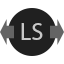
<style>
.page{position:relative;width:64px;height:64px;background:#ffffff}
.page>*{position:absolute;margin:0}
.t1{font:24px "MyriadPro-Regular";color:#c8c8c8}
</style>
<div class="page">
<p class="t1" style="left:21px;top:23px;width:22px;height:17px">LS</p>
</div>
